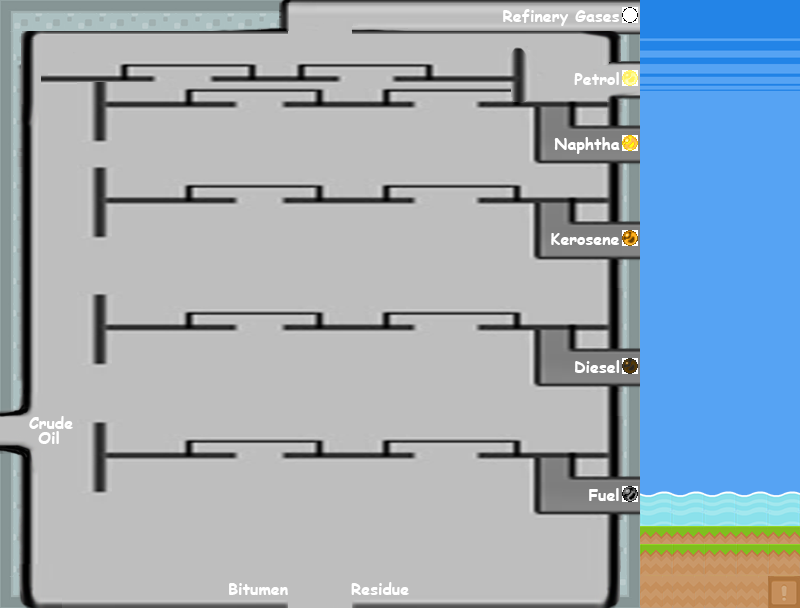
<style>
.page{position:relative;width:800px;height:608px;background:#bebebe}
.page>*{position:absolute;margin:0}
.t1{font:16px "ComicSansMS-Bold";color:#ffffff}
</style>
<div class="page">
<p class="t1" style="left:503px;top:9px;width:116px;height:17px">Refinery Gases</p>
<p class="t1" style="left:574px;top:72px;width:45px;height:13px">Petrol</p>
<p class="t1" style="left:554px;top:137px;width:66px;height:17px">Naphtha</p>
<p class="t1" style="left:551px;top:233px;width:68px;height:12px">Kerosene</p>
<p class="t1" style="left:575px;top:360px;width:45px;height:13px">Diesel</p>
<p class="t1" style="left:29px;top:416px;width:44px;height:13px">Crude</p>
<p class="t1" style="left:38px;top:431px;width:21px;height:13px">Oil</p>
<p class="t1" style="left:589px;top:488px;width:30px;height:13px">Fuel</p>
<p class="t1" style="left:351px;top:582px;width:58px;height:13px">Residue</p>
<p class="t1" style="left:229px;top:583px;width:59px;height:12px">Bitumen</p>
</div>
